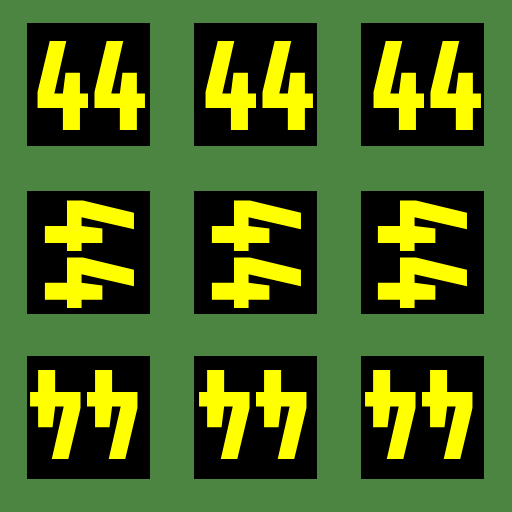
<style>
.page{position:relative;width:512px;height:512px;background:#4c8541}
.page>*{position:absolute;margin:0}
.t1{font:130px "Share-BoldOSF";color:#ffff00}
</style>
<div class="page">
<p class="t1" style="left:37px;top:41px;width:108px;height:90px">44</p>
<p class="t1" style="left:205px;top:41px;width:108px;height:90px">44</p>
<p class="t1" style="left:373px;top:41px;width:108px;height:90px">44</p>
<p class="t1" style="left:44px;top:200px;width:90px;height:108px;rotate:90deg">44</p>
<p class="t1" style="left:211px;top:200px;width:90px;height:108px;rotate:90deg">44</p>
<p class="t1" style="left:377px;top:200px;width:90px;height:108px;rotate:90deg">44</p>
<p class="t1" style="left:30px;top:369px;width:108px;height:90px;rotate:-180deg">44</p>
<p class="t1" style="left:199px;top:369px;width:108px;height:90px;rotate:-180deg">44</p>
<p class="t1" style="left:365px;top:369px;width:108px;height:90px;rotate:-180deg">44</p>
</div>
